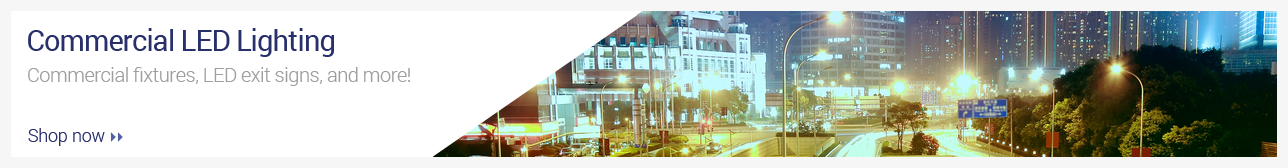
<style>
.page{position:relative;width:1288px;height:168px;background:#ffffff}
.page>*{position:absolute;margin:0}
.t1{font:49.1px "Roboto-Regular";letter-spacing:-0.025em;color:#27306b}
.t2{font:34.3px "Roboto-Light";letter-spacing:-0.025em;color:#9f9f9f}
</style>
<div class="page">
<p class="t1" style="left:28px;top:28px;width:306px;height:29px">Commercial LED Lighting</p>
<p class="t2" style="left:28px;top:67px;width:382px;height:19px">Commercial fixtures, LED exit signs, and more!</p>
</div>
